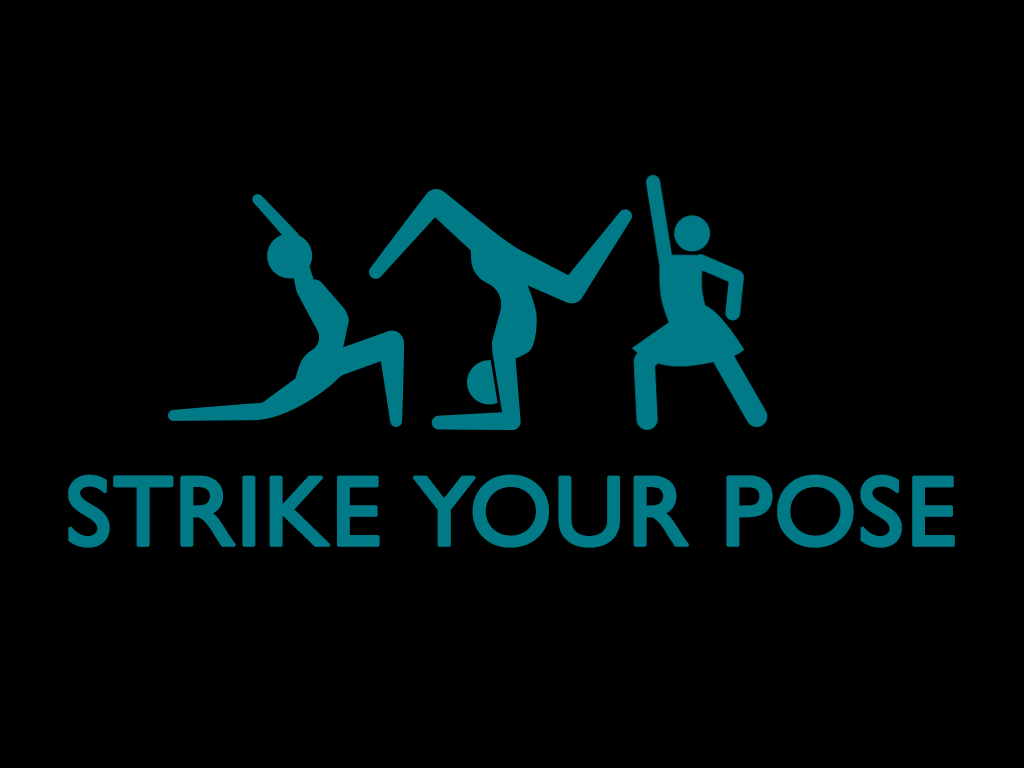
<style>
.page{position:relative;width:1024px;height:768px;background:#000000}
.page>*{position:absolute;margin:0}
.t1{font:100px "GillSans";color:#007a87;font-weight:bold}
</style>
<div class="page">
<p class="t1" style="left:68px;top:474px;width:887px;height:74px">STRIKE YOUR POSE</p>
</div>
